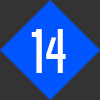
<style>
.page{position:relative;width:100px;height:100px;background:#333333}
.page>*{position:absolute;margin:0}
.t1{font:56.2px "LibelSuitRg-Regular";color:#ffffff}
</style>
<div class="page">
<p class="t1" style="left:31px;top:29px;width:35px;height:44px">14</p>
</div>
